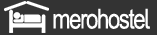
<style>
.page{position:relative;width:157px;height:35px;background:#333333}
.page>*{position:absolute;margin:0}
.t1{font:27.5px "ArialMT";letter-spacing:-0.06em;color:#ffffff;scale:0.8 1}
</style>
<div class="page">
<p class="t1" style="left:53px;top:8px;width:97px;height:21px">merohostel</p>
</div>
